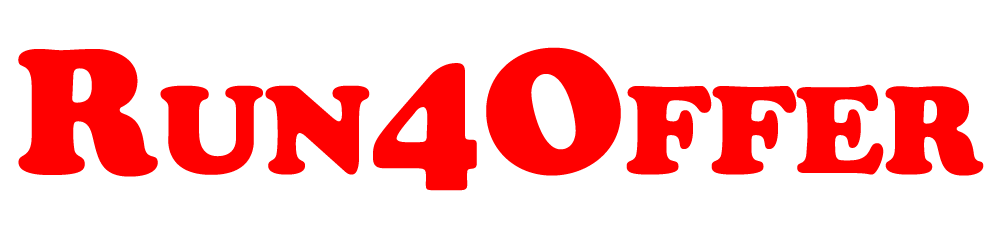
<style>
.page{position:relative;width:1000px;height:250px;background:#ffffff}
.page>*{position:absolute;margin:0}
.t1{font:175px "CooperBlackStd";color:#ff0000;font-variant:small-caps}
</style>
<div class="page">
<p class="t1" style="left:18px;top:47px;width:966px;height:144px">Run4Offer</p>
</div>
